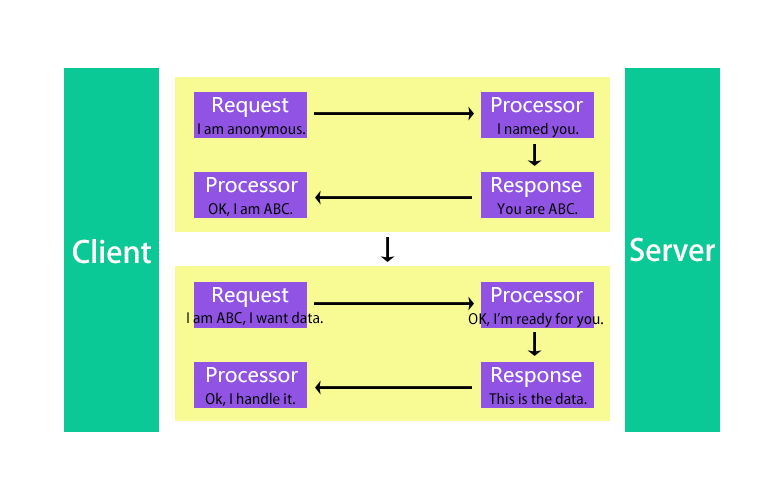
<style>
.page{position:relative;width:784px;height:500px;background:#ffffff}
.page>*{position:absolute;margin:0}
.t1{font:20px "MicrosoftYaHei";color:#ffffff}
.t2{font:14px "AdobeHeitiStd-Regular";color:#000000}
.t3{font:30px "AdobeHeitiStd-Regular";color:#ffffff}
</style>
<div class="page">
<p class="t1" style="left:213px;top:97px;width:76px;height:20px">Request</p>
<p class="t1" style="left:492px;top:97px;width:91px;height:16px">Processor</p>
<p class="t2" style="left:198px;top:123px;width:107px;height:15px">I am anonymous.</p>
<p class="t2" style="left:498px;top:122px;width:81px;height:16px">I named you.</p>
<p class="t1" style="left:207px;top:177px;width:91px;height:16px">Processor</p>
<p class="t1" style="left:492px;top:177px;width:90px;height:20px">Response</p>
<p class="t2" style="left:208px;top:203px;width:85px;height:13px">OK, I am ABC.</p>
<p class="t2" style="left:497px;top:203px;width:81px;height:12px">You are ABC.</p>
<p class="t3" style="left:73px;top:239px;width:78px;height:25px">Client</p>
<p class="t3" style="left:630px;top:237px;width:85px;height:25px">Server</p>
<p class="t1" style="left:213px;top:287px;width:76px;height:20px">Request</p>
<p class="t1" style="left:492px;top:287px;width:91px;height:16px">Processor</p>
<p class="t2" style="left:187px;top:311px;width:136px;height:14px">I am ABC, I want data.</p>
<p class="t2" style="left:468px;top:312px;width:135px;height:16px">OK, I'm ready for you.</p>
<p class="t1" style="left:207px;top:367px;width:91px;height:16px">Processor</p>
<p class="t1" style="left:492px;top:367px;width:90px;height:20px">Response</p>
<p class="t2" style="left:205px;top:392px;width:90px;height:14px">Ok, I handle it.</p>
<p class="t2" style="left:489px;top:392px;width:98px;height:13px">This is the data.</p>
</div>
